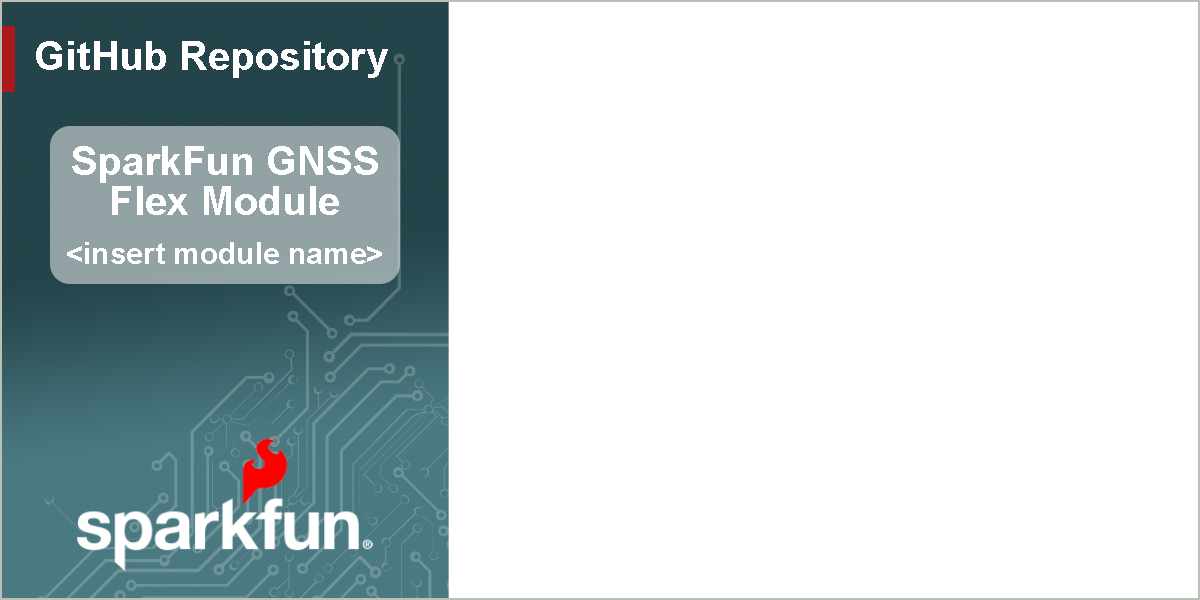
<style>
.page{position:relative;width:1200px;height:600px;background:#ffffff}
.page>*{position:absolute;margin:0}
.t1{font:40px "Arial-BoldMT";color:#ffffff}
.t2{font:30px "Arial-BoldMT";color:#ffffff}
</style>
<div class="page">
<p class="t1" style="left:36px;top:41px;width:352px;height:37px">GitHub Repository</p>
<p class="t1" style="left:72px;top:146px;width:306px;height:69px;text-align:center">SparkFun GNSS<br>Flex Module</p>
<p class="t2" style="left:67px;top:242px;width:315px;height:22px">&lt;insert module name&gt;</p>
</div>
